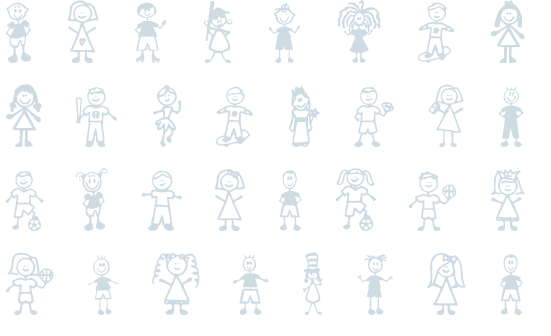
<style>
.page{position:relative;width:551px;height:336px;background:#ffffff}
.page>*{position:absolute;margin:0}
.t1{font:70px "GirlCharacters";color:#cfdbe3}
.t2{font:70px "BoyCharacters";color:#cfdbe3}
</style>
<div class="page">
<p class="t1" style="left:5px;top:0px;width:520px;height:315px;text-align:justify"><span class="t2">b </span>x <span class="t2">c </span>n <span class="t2">d </span>h <span class="t2">r </span>j <br>k <span class="t2">F </span>O <span class="t2">G </span>B <span class="t2">C </span>L <span class="t2">T<br>u </span>f <span class="t2">I </span>w <span class="t2">z </span>K <span class="t2">E </span>t<br>N <span class="t2">U </span>u <span class="t2">V </span>p <span class="t2">W </span>Q <span class="t2">Z<br>b </span>x <span class="t2">c </span>n <span class="t2">d </span>h <span class="t2">r </span>j</p>
</div>
